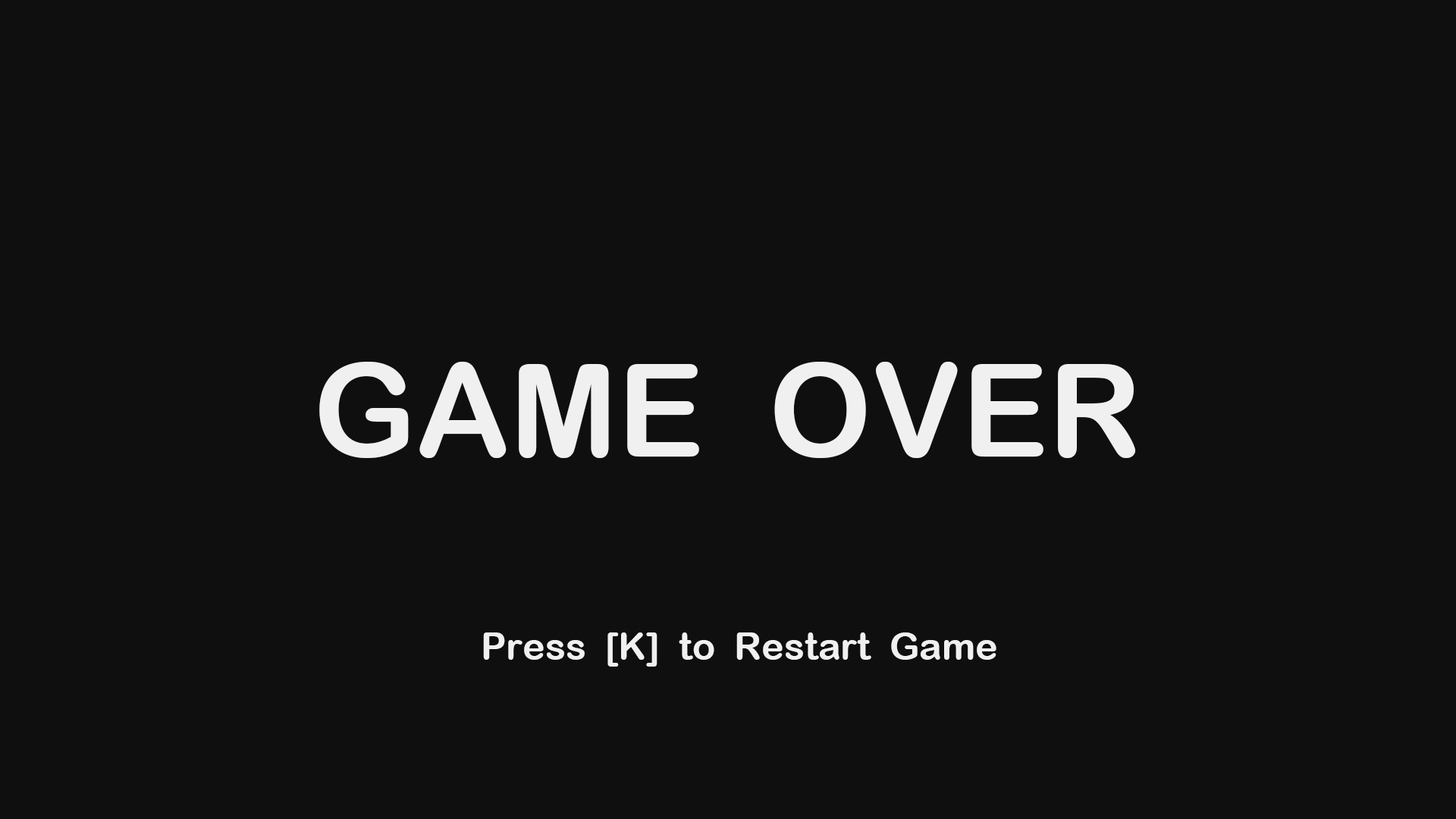
<style>
.page{position:relative;width:1456px;height:819px;background:#0f0f0f}
.page>*{position:absolute;margin:0}
.t1{font:31.2px "ArialRoundedMTBold";color:#f0f0f0}
.t2{font:9.1px "ArialRoundedMTBold";color:#f0f0f0}
</style>
<div class="page">
<p class="t1" style="left:319px;top:362px;width:817px;height:96px">GAME  OVER</p>
<p class="t2" style="left:483px;top:632px;width:513px;height:35px">Press  [K]  to  Restart  Game</p>
</div>
